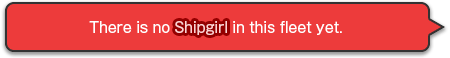
<style>
.page{position:relative;width:450px;height:58px;background:#ed3b3b}
.page>*{position:absolute;margin:0}
.t1{font:14px "GothicMB101Pro-Regular";color:#ffffff}
.t2{font:14px "GothicMB101Pro-Regular";color:#ffd3d3}
</style>
<div class="page">
<p class="t1" style="left:89px;top:21px;width:253px;height:14px">There is no <span class="t2">Shipgirl</span> in this fleet yet.</p>
<p class="t1" style="left:89px;top:21px;width:253px;height:14px">There is no <span class="t2">Shipgirl</span> in this fleet yet.</p>
</div>
